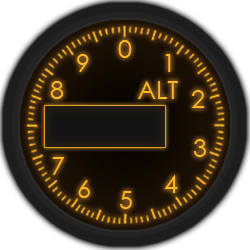
<style>
.page{position:relative;width:250px;height:250px}
.page>*{position:absolute;margin:0}
.t1{font:25px "CenturyGothic";color:#ffb924}
</style>
<div class="page">
<p class="t1" style="left:118px;top:40px;width:14px;height:18px">0</p>
<p class="t1" style="left:77px;top:54px;width:12px;height:18px">9</p>
<p class="t1" style="left:165px;top:54px;width:6px;height:18px">1</p>
<p class="t1" style="left:50px;top:81px;width:14px;height:18px">8</p>
<p class="t1" style="left:138px;top:81px;width:40px;height:18px">ALT</p>
<p class="t1" style="left:191px;top:90px;width:14px;height:18px">2</p>
<p class="t1" style="left:193px;top:139px;width:13px;height:18px">3</p>
<p class="t1" style="left:52px;top:157px;width:13px;height:18px">7</p>
<p class="t1" style="left:78px;top:180px;width:12px;height:18px">6</p>
<p class="t1" style="left:164px;top:175px;width:14px;height:18px">4</p>
<p class="t1" style="left:120px;top:191px;width:12px;height:18px">5</p>
</div>
